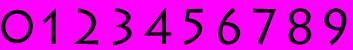
<style>
.page{position:relative;width:353px;height:50px;background:#ff00ff}
.page>*{position:absolute;margin:0}
.t1{font:50px "LithosPro-Regular";color:#000000}
</style>
<div class="page">
<p class="t1" style="left:1px;top:7px;width:346px;height:39px">0123456789</p>
</div>
